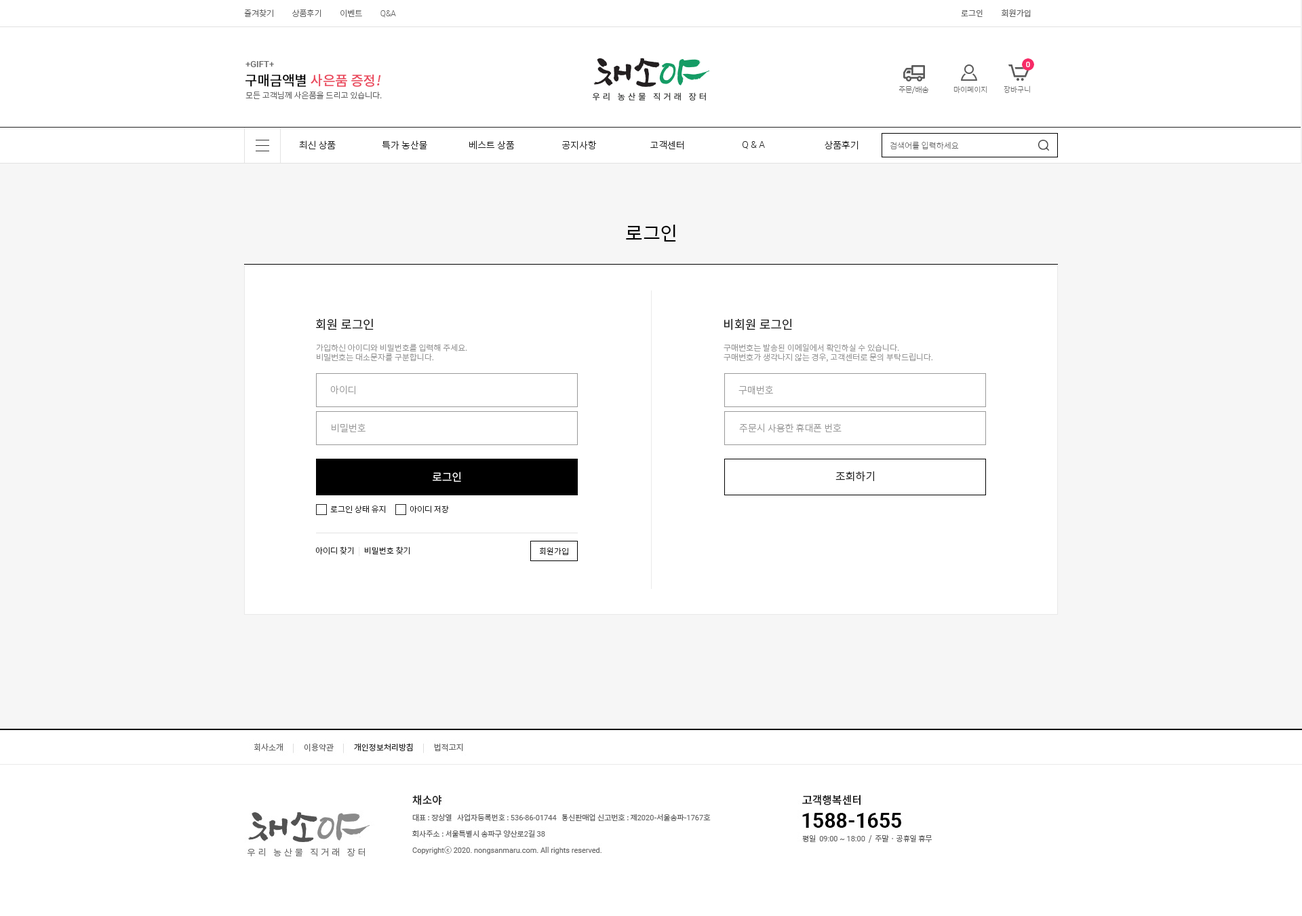
<style>
.page{position:relative;width:1302px;height:916px;background:#ffffff}
.page>*{position:absolute;margin:0}
.t1{font:8.1px "NotoSansCJKkr-Light";color:#666666}
.t2{font:8.1px "Roboto-Light";color:#666666}
.t3{font:8.1px "NotoSansCJKkr-DemiLight";color:#666666}
.t4{font:8.8px "Roboto-Medium";color:#666666}
.t5{font:13.6px "NotoSansCJKkr-Medium";color:#ea475c}
.t6{font:13.6px "NotoSansCJKkr-Medium";color:#000000}
.t7{font:13.6px "NotoSansCJKkr-Medium";color:#ea475c;font-style:italic}
.t8{font:7.5px "NotoSansCJKkr-Thin";color:#666666}
.t9{font:9.5px "NotoSansCJKkr-Light";color:#222222}
.t10{font:9.5px "Roboto-Light";color:#222222}
.t11{font:8.1px "NotoSansCJKkr-Thin";color:#666666}
.t12{font:19px "NotoSansCJKkr-Regular";color:#000000}
.t13{font:12.2px "NotoSansCJKkr-Regular";color:#222222}
.t14{font:8.1px "NotoSansCJKkr-Light";color:#999999}
.t15{font:9.5px "NotoSansCJKkr-Light";color:#999999}
.t16{font:10.9px "NotoSansCJKkr-DemiLight";color:#ffffff}
.t17{font:10.9px "NotoSansCJKkr-DemiLight";color:#222222}
.t18{font:8.1px "NotoSansCJKkr-Light";color:#222222}
.t19{font:8.1px "NotoSansCJKkr-Light";color:#e2e2e2}
</style>
<div class="page">
<p class="t1" style="left:244px;top:9px;width:152px;height:9px">즐겨찾기          상품후기          이벤트          <span class="t2">Q&amp;A</span></p>
<p class="t3" style="left:961px;top:9px;width:70px;height:9px">로그인          회원가입</p>
<p class="t4" style="left:246px;top:61px;width:28px;height:6px">+GIFT+</p>
<p class="t5" style="left:246px;top:74px;width:135px;height:13px"><span class="t6">구매금액별 </span>사은품 증정<span class="t7">!</span></p>
<p class="t8" style="left:899px;top:85px;width:30px;height:9px">주문/배송</p>
<p class="t8" style="left:954px;top:86px;width:34px;height:8px">마이페이지</p>
<p class="t8" style="left:1004px;top:85px;width:26px;height:9px">장바구니</p>
<p class="t1" style="left:246px;top:91px;width:136px;height:8px">모든 고객님께 사은품을 드리고 있습니다.</p>
<p class="t9" style="left:299px;top:140px;width:37px;height:9px">최신 상품</p>
<p class="t9" style="left:382px;top:140px;width:45px;height:10px">특가 농산물</p>
<p class="t9" style="left:469px;top:140px;width:46px;height:10px">베스트 상품</p>
<p class="t9" style="left:562px;top:140px;width:35px;height:10px">공지사항</p>
<p class="t9" style="left:650px;top:140px;width:34px;height:10px">고객센터</p>
<p class="t10" style="left:743px;top:141px;width:22px;height:8px">Q &amp; A</p>
<p class="t9" style="left:825px;top:140px;width:34px;height:10px">상품후기</p>
<p class="t11" style="left:890px;top:141px;width:69px;height:9px">검색어를 입력하세요</p>
<p class="t12" style="left:626px;top:225px;width:50px;height:16px">로그인</p>
<p class="t13" style="left:316px;top:318px;width:58px;height:12px">회원 로그인</p>
<p class="t13" style="left:724px;top:318px;width:68px;height:12px">비회원 로그인</p>
<p class="t14" style="left:316px;top:344px;width:151px;height:17px">가입하신 아이디와 비밀번호를 입력해 주세요.<br>비밀번호는 대소문자를 구분합니다.</p>
<p class="t14" style="left:724px;top:343px;width:209px;height:19px">구매번호는 발송된 이메일에서 확인하실 수 있습니다.<br>구매번호가 생각나지 않는 경우, 고객센터로 문의 부탁드립니다.</p>
<p class="t15" style="left:330px;top:385px;width:25px;height:10px">아이디</p>
<p class="t15" style="left:739px;top:385px;width:34px;height:10px">구매번호</p>
<p class="t15" style="left:332px;top:423px;width:34px;height:10px">비밀번호</p>
<p class="t15" style="left:739px;top:423px;width:103px;height:10px">주문시 사용한 휴대폰 번호</p>
<p class="t16" style="left:433px;top:471px;width:28px;height:11px">로그인</p>
<p class="t17" style="left:836px;top:471px;width:38px;height:11px">조회하기</p>
<p class="t18" style="left:330px;top:505px;width:56px;height:8px">로그인 상태 유지</p>
<p class="t18" style="left:410px;top:505px;width:39px;height:8px">아이디 저장</p>
<p class="t18" style="left:315px;top:546px;width:95px;height:10px">아이디 찾기 <span class="t19"> |  </span>비밀번호 찾기</p>
<p class="t18" style="left:540px;top:547px;width:28px;height:8px">회원가입</p>
</div>
